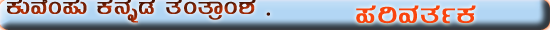
<style>
.page{position:relative;width:550px;height:30px}
.page>*{position:absolute;margin:0}
.t1{font:30px "Kuvempu_Eng_0005"}
.t2{font:36px "Kuvempu_Eng_0005";color:#f9440d}
</style>
<div class="page">
<p class="t1" style="left:7px;top:0px;width:263px;height:23px">PÀÄªÉA¥ÀÄ PÀ£ÀßqÀ vÀAvÁæA±À .</p>
<p class="t2" style="left:356px;top:5px;width:120px;height:19px">¥ÀjªÀvÀðPÀ</p>
</div>
